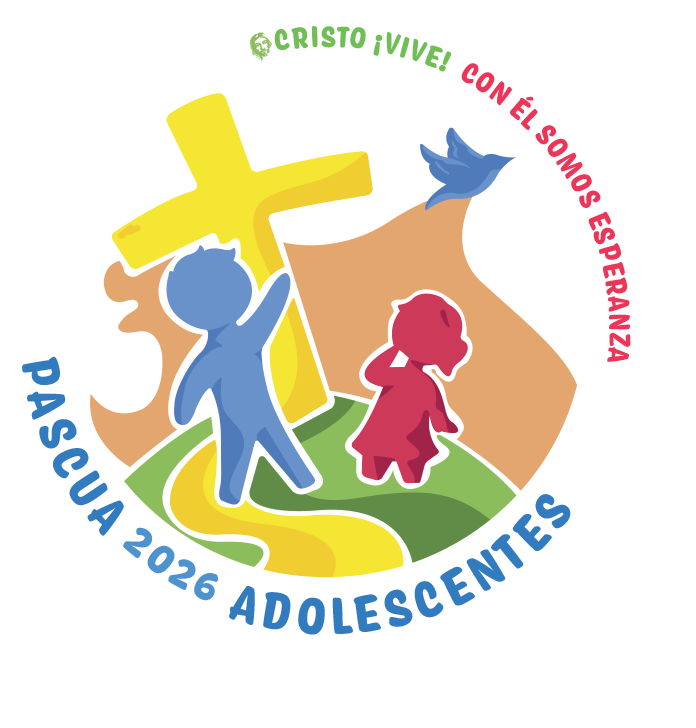
<style>
.page{position:relative;width:696px;height:728px;background:#ffffff}
.page>*{position:absolute;margin:0}
.t1{font:31.2px/11.7px "Coniferous-Black"}
.t2{font:54.4px/10.8px "Coniferous-Black";color:#317bbe}
.t3{font:45.8px/10.8px "Coniferous-Black";color:#317bbe}
</style>
<div class="page">
<p class="t1" style="left:274px;top:26px;width:357px;height:336px">CRISTO ¡VIVE!  CON ÉL SOMOS ESPERANZA</p>
<p class="t2" style="left:22px;top:356px;width:549px;height:279px">PASCUA <span class="t3">2026 </span>ADOLESCENTES</p>
</div>
